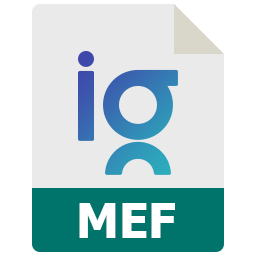
<style>
.page{position:relative;width:256px;height:256px;background:#eaeaea}
.page>*{position:absolute;margin:0}
.t1{font:48px "Tahoma-Bold";color:#ffffff}
</style>
<div class="page">
<p class="t1" style="left:79px;top:203px;width:96px;height:35px">MEF</p>
</div>
